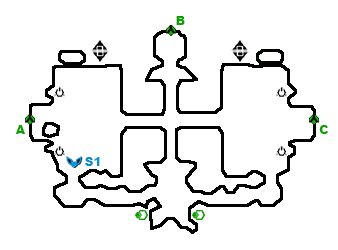
<style>
.page{position:relative;width:338px;height:250px;background:#ffffff}
.page>*{position:absolute;margin:0}
.t1{font:12px "Arial-Black";color:#0d9e01}
.t2{font:12px "Arial-Black";color:#0692d2}
</style>
<div class="page">
<p class="t1" style="left:176px;top:16px;width:9px;height:9px">B</p>
<p class="t1" style="left:15px;top:125px;width:10px;height:9px">A</p>
<p class="t1" style="left:319px;top:125px;width:9px;height:9px">C</p>
<p class="t2" style="left:85px;top:157px;width:15px;height:9px">S1</p>
</div>
